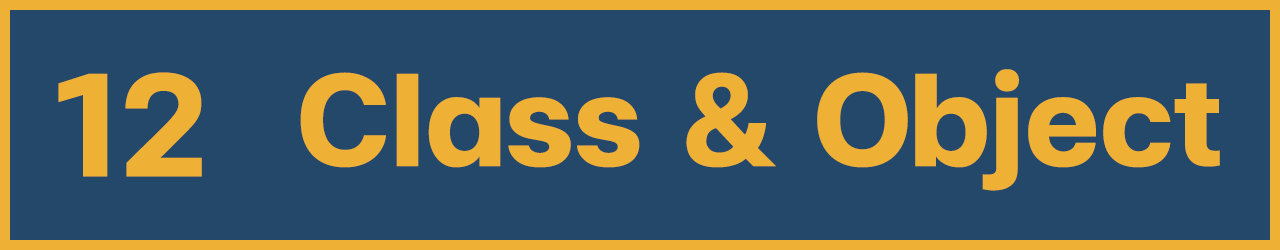
<style>
.page{position:relative;width:1280px;height:250px;background:#23486a}
.page>*{position:absolute;margin:0}
.t1{font:200px "FCMinimalBold";color:#efb036}
.t2{font:180px "FCMinimalBold";color:#efb036}
</style>
<div class="page">
<p class="t1" style="left:58px;top:72px;width:144px;height:105px">12</p>
<p class="t2" style="left:300px;top:69px;width:920px;height:122px">Class &amp; Object</p>
</div>
